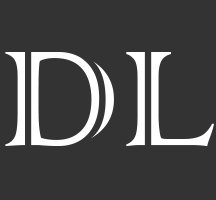
<style>
.page{position:relative;width:216px;height:200px;background:#333333}
.page>*{position:absolute;margin:0}
.t1{font:179.7px "ColonnaMT";color:#ffffff}
</style>
<div class="page">
<p class="t1" style="left:5px;top:52px;width:209px;height:95px">DL</p>
</div>
